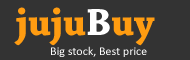
<style>
.page{position:relative;width:190px;height:60px;background:#333333}
.page>*{position:absolute;margin:0}
.t1{font:40px "ChaparralPro-Bold";color:#ff9c11}
.t2{font:40px "ChaparralPro-Bold";color:#ffffff}
.t3{font:12px "Calibri";color:#ffffff}
</style>
<div class="page">
<p class="t1" style="left:14px;top:7px;width:141px;height:39px">juju<span class="t2">B</span>uy</p>
<p class="t3" style="left:51px;top:46px;width:96px;height:11px">Big stock, Best price</p>
</div>
